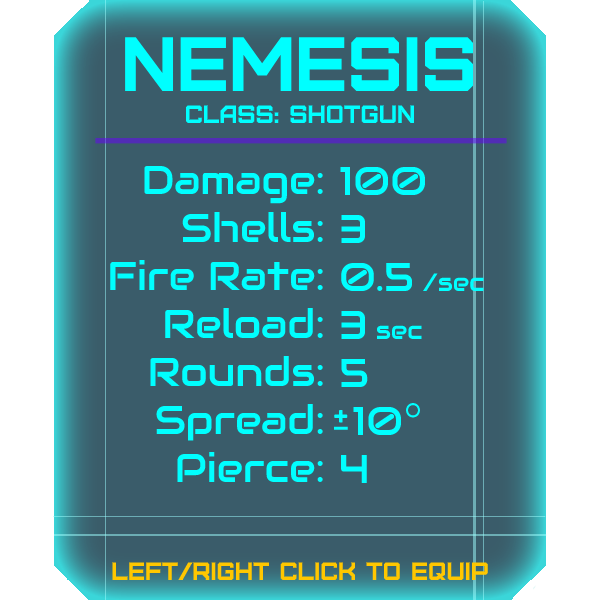
<style>
.page{position:relative;width:600px;height:600px;background:#3a5c6a}
.page>*{position:absolute;margin:0}
.t1{font:76.8px "Furore";color:#00ffff}
.t2{font:25px "Furore";color:#00ffff}
.t3{font:40px "Audiowide-Regular";color:#00ffff}
.t4{font:25px "Audiowide-Regular";color:#00ffff}
.t5{font:25px "Furore";color:#ffc700}
</style>
<div class="page">
<p class="t1" style="left:125px;top:37px;width:348px;height:54px">Nemesis</p>
<p class="t2" style="left:186px;top:105px;width:228px;height:18px">Class: Shotgun</p>
<p class="t3" style="left:110px;top:165px;width:213px;height:317px;text-align:right">Damage:<br>Shells:<br>Fire Rate:<br>Reload:<br>Rounds:<br>Spread:<br>Pierce:</p>
<p class="t3" style="left:340px;top:166px;width:144px;height:317px">100<br>3<br>0.5 <span class="t4">/sec<br></span>3 <span class="t4">sec<br></span>5<br> 10<br>4</p>
<p class="t5" style="left:112px;top:562px;width:376px;height:18px">left/right click to equip</p>
</div>
